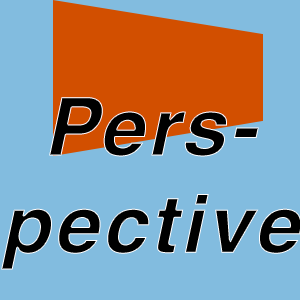
<style>
.page{position:relative;width:300px;height:300px;background:#82bcdf}
.page>*{position:absolute;margin:0}
.t1{font:81px "Helvetica-BoldOblique";letter-spacing:0.04em;color:#000000}
</style>
<div class="page">
<p class="t1" style="left:1px;top:97px;width:301px;height:173px;text-align:center">Pers-<br>pective</p>
</div>
